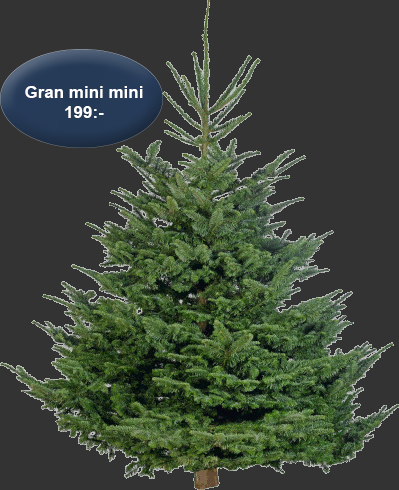
<style>
.page{position:relative;width:399px;height:490px;background:#333333}
.page>*{position:absolute;margin:0}
.t1{font:17px "Arial-BoldMT";color:#ffffff}
</style>
<div class="page">
<p class="t1" style="left:25px;top:86px;width:118px;height:32px;text-align:center">Gran mini mini <br>199:-</p>
</div>
